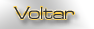
<style>
.page{position:relative;width:94px;height:29px}
.page>*{position:absolute;margin:0}
.t1{font:18px "MicrogrammaD-MediExte";color:#313131}
</style>
<div class="page">
<p class="t1" style="left:14px;top:7px;width:60px;height:12px">Voltar</p>
</div>
